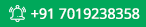
<style>
.page{position:relative;width:146px;height:27px;background:#00a85a}
.page>*{position:absolute;margin:0}
.t1{font:14px "OpenSans";letter-spacing:-0.02em;color:#ffffff;font-weight:bold}
</style>
<div class="page">
<p class="t1" style="left:31px;top:8px;width:109px;height:11px">+91 7019238358</p>
</div>
